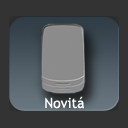
<style>
.page{position:relative;width:128px;height:128px;background:#333333}
.page>*{position:absolute;margin:0}
.t1{font:14px "TrebuchetMS";color:#ffffff}
</style>
<div class="page">
<p class="t1" style="left:45px;top:96px;width:39px;height:13px">Novitá</p>
</div>
